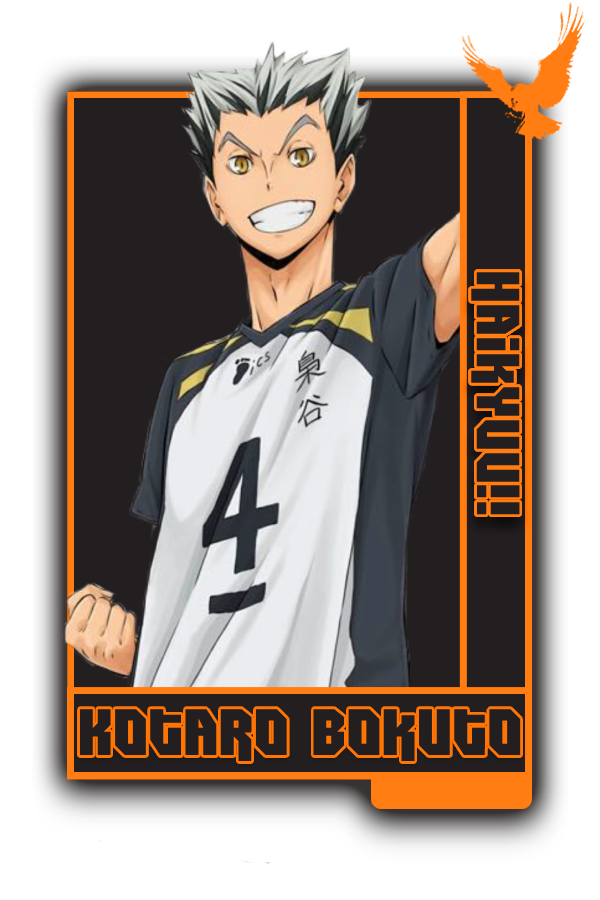
<style>
.page{position:relative;width:600px;height:900px;background:#231e1f}
.page>*{position:absolute;margin:0}
.t1{font:60.7px "Dimitri";color:#231f20}
.t2{font:65.2px "Dimitri";color:#231f20}
</style>
<div class="page">
<p class="t1" style="left:471px;top:272px;width:49px;height:243px;rotate:90deg">Haikyuu!!</p>
<p class="t1" style="left:471px;top:272px;width:49px;height:243px;rotate:90deg">Haikyuu!!</p>
<p class="t2" style="left:79px;top:709px;width:442px;height:52px">Kotaro Bokuto</p>
</div>
